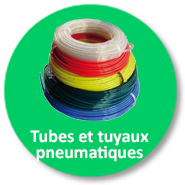
<style>
.page{position:relative;width:185px;height:185px;background:#00cc66}
.page>*{position:absolute;margin:0}
.t1{font:18px/16px "Calibri-Bold";color:#ffffff}
</style>
<div class="page">
<p class="t1" style="left:30px;top:129px;width:119px;height:33px;text-align:center">Tubes et tuyaux  <br>pneumatiques</p>
</div>
